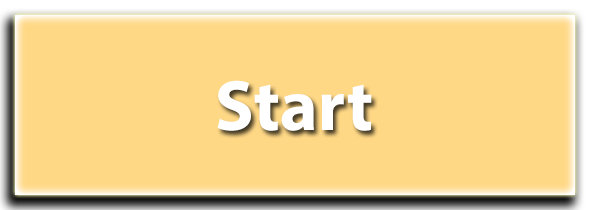
<style>
.page{position:relative;width:590px;height:210px;background:#ffd886}
.page>*{position:absolute;margin:0}
.t1{font:72px "MyriadPro-Bold";color:#ffffff}
</style>
<div class="page">
<p class="t1" style="left:217px;top:80px;width:155px;height:51px">Start</p>
</div>
